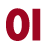
<style>
.page{position:relative;width:48px;height:48px;background:#ffffff}
.page>*{position:absolute;margin:0}
.t1{font:46px "AbadiMT-CondensedExtraBold";color:#9e0622}
</style>
<div class="page">
<p class="t1" style="left:6px;top:8px;width:35px;height:33px">OI</p>
</div>
